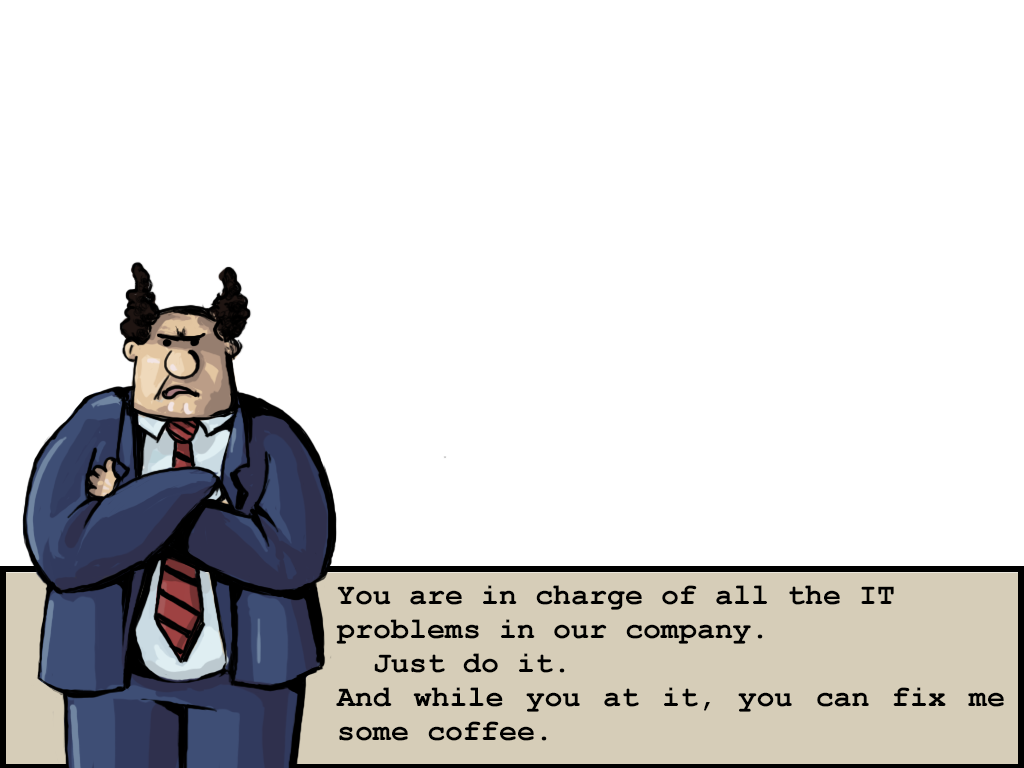
<style>
.page{position:relative;width:1024px;height:768px;background:#ffffff}
.page>*{position:absolute;margin:0}
.t1{font:30px/34px "CourierNewPS-BoldMT";color:#000000}
</style>
<div class="page">
<p class="t1" style="left:336px;top:585px;width:668px;height:156px;text-align:justify">You are in charge of all the IT <br>problems in our company. <br> Just do it. <br>And while you at it, you can fix me some coffee.</p>
</div>
